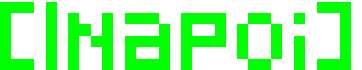
<style>
.page{position:relative;width:362px;height:70px;background:#ffffff}
.page>*{position:absolute;margin:0}
.t1{font:57px "Pixeled";color:#00ff00}
</style>
<div class="page">
<p class="t1" style="left:0px;top:2px;width:351px;height:68px">[Inapoi]</p>
</div>
